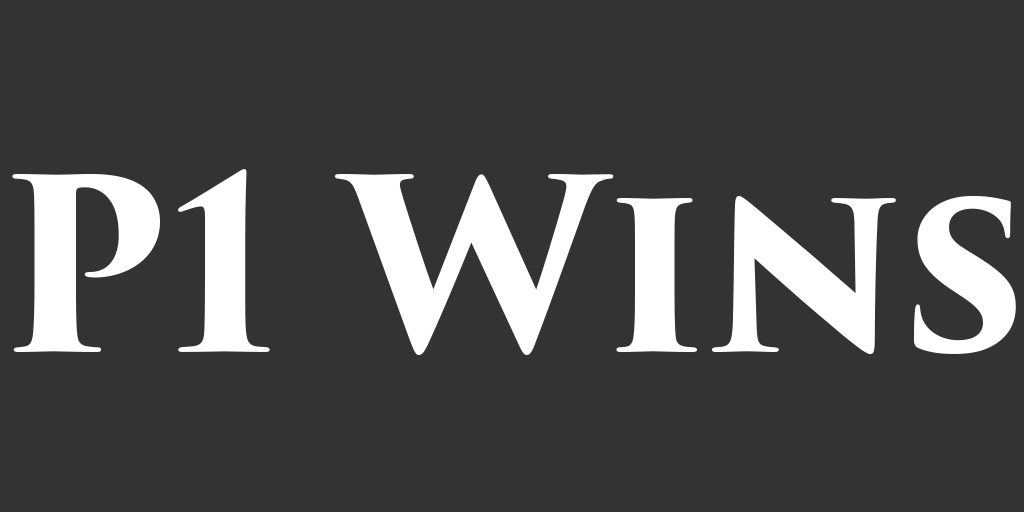
<style>
.page{position:relative;width:1024px;height:512px;background:#333333}
.page>*{position:absolute;margin:0}
.t1{font:234.2px "TrajanPro3-Bold";color:#ffffff}
</style>
<div class="page">
<p class="t1" style="left:12px;top:169px;width:1004px;height:186px">P1 Wins</p>
</div>
